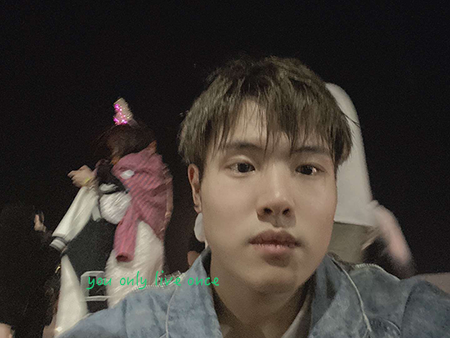
<style>
.page{position:relative;width:450px;height:338px}
.page>*{position:absolute;margin:0}
.t1{font:18.8px "HanziPenTC-W3";color:#18c876}
</style>
<div class="page">
<p class="t1" style="left:86px;top:270px;width:134px;height:20px">you only live once</p>
</div>
